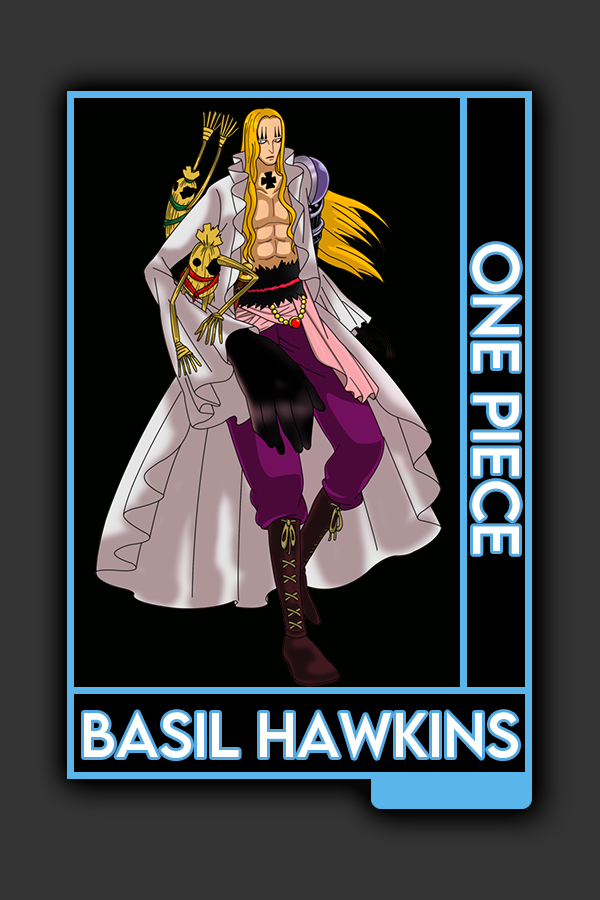
<style>
.page{position:relative;width:600px;height:900px;background:#333333}
.page>*{position:absolute;margin:0}
.t1{font:58.4px "LEMONMILK-Regular";color:#ffffff}
.t2{font:55.4px "LEMONMILK-Regular";color:#ffffff}
</style>
<div class="page">
<p class="t1" style="left:472px;top:244px;width:48px;height:310px;rotate:90deg">One Piece</p>
<p class="t2" style="left:84px;top:712px;width:434px;height:46px">Basil Hawkins</p>
</div>
